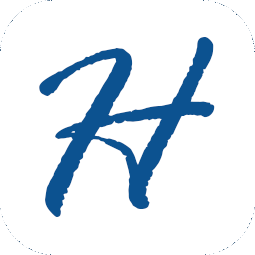
<style>
.page{position:relative;width:255px;height:255px;background:#ffffff}
.page>*{position:absolute;margin:0}
.t1{font:250px "RageItalic";color:#0c5290}
</style>
<div class="page">
<p class="t1" style="left:39px;top:37px;width:176px;height:180px">H</p>
</div>
